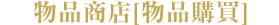
<style>
.page{position:relative;width:279px;height:25px;background:#ffffff}
.page>*{position:absolute;margin:0}
.t1{font:24px "RyuminPr6N-ExBold";letter-spacing:0.075em;color:#c3a956}
</style>
<div class="page">
<p class="t1" style="left:34px;top:0px;width:213px;height:25px">物品商店[物品購買]</p>
</div>
